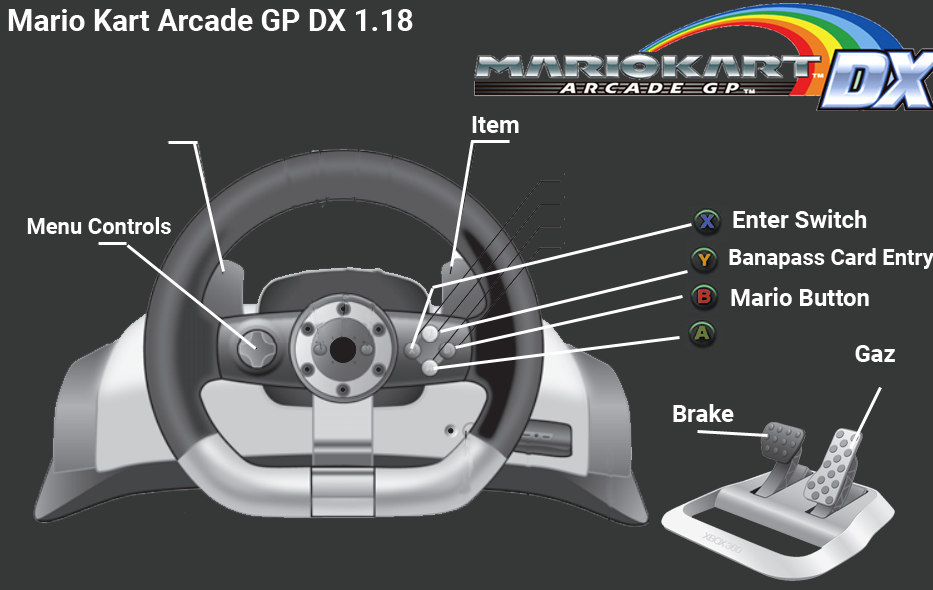
<style>
.page{position:relative;width:933px;height:590px;background:#363838}
.page>*{position:absolute;margin:0}
.t1{font:30px "Roboto-Bold";color:#ffffff}
.t2{font:24px "Roboto-Bold";color:#ffffff}
.t3{font:22px "Roboto-Bold";color:#ffffff}
</style>
<div class="page">
<p class="t1" style="left:8px;top:8px;width:405px;height:23px">Mario Kart Arcade GP DX 1.18</p>
<p class="t2" style="left:472px;top:116px;width:47px;height:17px">Item</p>
<p class="t2" style="left:733px;top:209px;width:134px;height:19px">Enter Switch</p>
<p class="t3" style="left:27px;top:217px;width:144px;height:17px">Menu Controls</p>
<p class="t3" style="left:729px;top:248px;width:205px;height:21px">Banapass Card Entry</p>
<p class="t2" style="left:731px;top:287px;width:138px;height:19px">Mario Button</p>
<p class="t2" style="left:855px;top:345px;width:40px;height:17px">Gaz</p>
<p class="t2" style="left:673px;top:404px;width:61px;height:18px">Brake</p>
</div>
